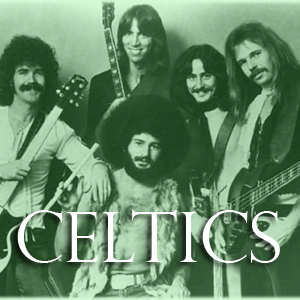
<style>
.page{position:relative;width:300px;height:300px}
.page>*{position:absolute;margin:0}
.t1{font:70px "PerpetuaTitlingMT-Light";color:#ffffff}
</style>
<div class="page">
<p class="t1" style="left:17px;top:209px;width:263px;height:54px">CELTICS</p>
</div>
